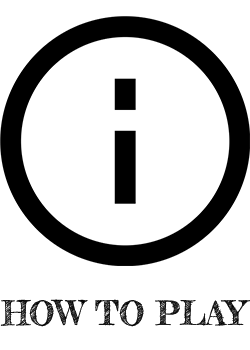
<style>
.page{position:relative;width:250px;height:350px;background:#ffffff}
.page>*{position:absolute;margin:0}
.t1{font:33px "FrederickatheGreat-Regular";color:#000000}
</style>
<div class="page">
<p class="t1" style="left:0px;top:299px;width:251px;height:28px">HOW TO PLAY</p>
</div>
